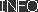
<style>
.page{position:relative;width:38px;height:12px;background:#333333}
.page>*{position:absolute;margin:0}
.t1{font:16px "Verdana";letter-spacing:-0.03em;color:#ffffff}
</style>
<div class="page">
<p class="t1" style="left:0px;top:0px;width:38px;height:12px">INFO</p>
</div>
